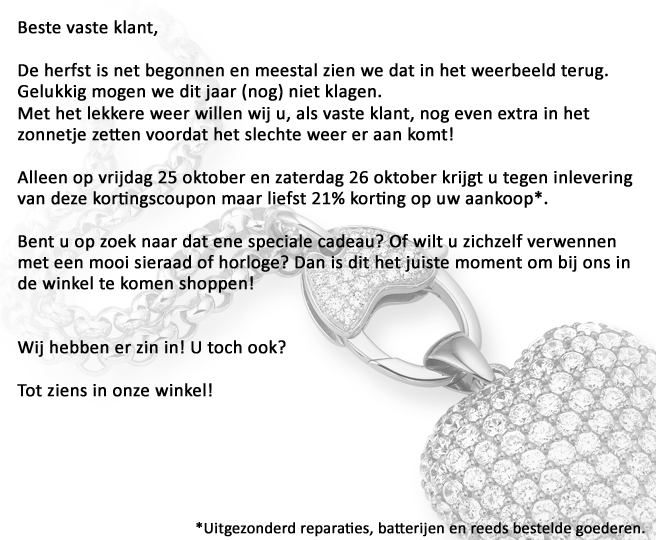
<style>
.page{position:relative;width:656px;height:540px;background:#ffffff}
.page>*{position:absolute;margin:0}
.t1{font:18.7px/21.3px "Calibri";color:#000000;font-weight:bold}
.t2{font:16px "Calibri";color:#000000;font-weight:bold}
</style>
<div class="page">
<p class="t1" style="left:17px;top:20px;width:616px;height:377px">Beste vaste klant,<br><br>De herfst is net begonnen en meestal zien we dat in het weerbeeld terug. <br>Gelukkig mogen we dit jaar (nog) niet klagen. <br>Met het lekkere weer willen wij u, als vaste klant, nog even extra in het <br>zonnetje zetten voordat het slechte weer er aan komt!<br><br>Alleen op vrijdag 25 oktober en zaterdag 26 oktober krijgt u tegen inlevering <br>van deze kortingscoupon maar liefst 21% korting op uw aankoop*. <br><br>Bent u op zoek naar dat ene speciale cadeau? Of wilt u zichzelf verwennen <br>met een mooi sieraad of horloge? Dan is dit het juiste moment om bij ons in <br>de winkel te komen shoppen! <br><br><br>Wij hebben er zin in! U toch ook? <br><br>Tot ziens in onze winkel!</p>
<p class="t2" style="left:196px;top:522px;width:449px;height:15px">*Uitgezonderd reparaties, batterijen en reeds bestelde goederen.</p>
</div>
